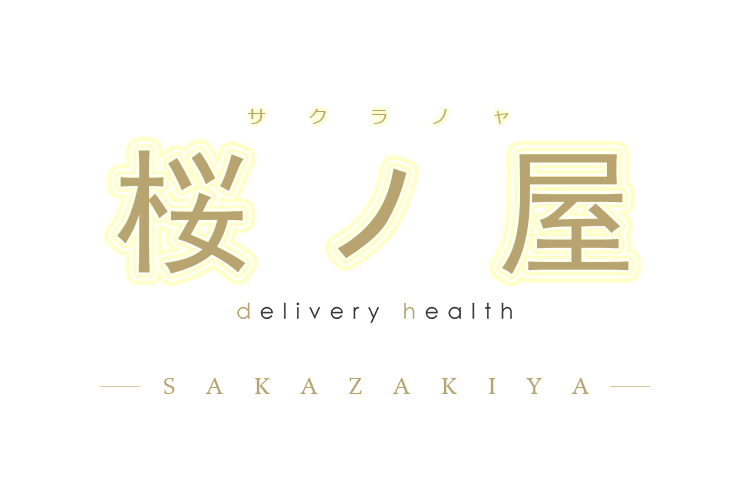
<style>
.page{position:relative;width:750px;height:500px;background:#ffffff}
.page>*{position:absolute;margin:0}
.t1{font:18px "Meiryo";letter-spacing:2.4em;color:#b8a470}
.t2{font:140px "SimHei";letter-spacing:0.37em;color:#b8a470}
.t3{font:24px "Constantia";letter-spacing:1.3em;color:#b8a470}
</style>
<div class="page">
<p class="t1" style="left:247px;top:109px;width:261px;height:15px">サクラノャ</p>
<p class="t2" style="left:117px;top:150px;width:512px;height:125px">桜ノ屋</p>
<p class="t3" style="left:164px;top:378px;width:425px;height:16px">SAKAZAKIYA</p>
</div>
